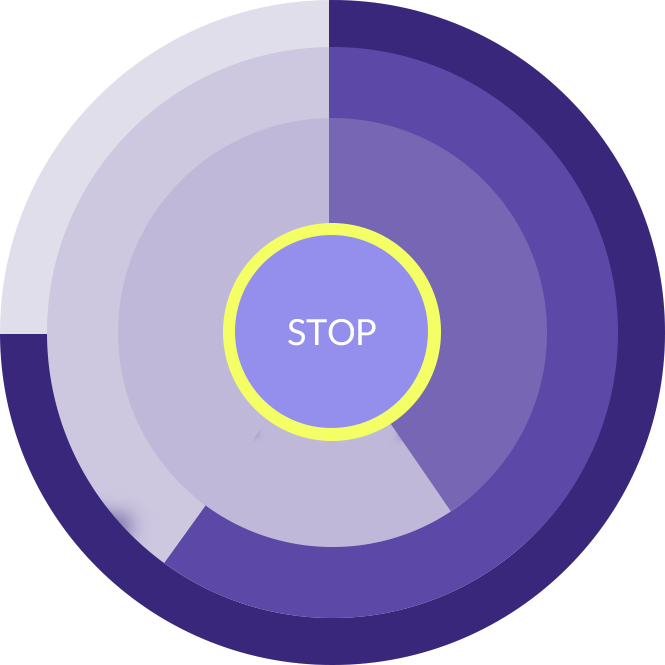
<style>
.page{position:relative;width:665px;height:665px;background:#ffffff}
.page>*{position:absolute;margin:0}
.t1{font:36px "Lato-Regular";color:#ffffff}
</style>
<div class="page">
<p class="t1" style="left:288px;top:319px;width:88px;height:27px">STOP</p>
</div>
